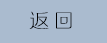
<style>
.page{position:relative;width:107px;height:43px;background:#aabbcf}
.page>*{position:absolute;margin:0}
.t1{font:19.4px "huxiaobo-meixin-QQ:371136753";color:#000000}
</style>
<div class="page">
<p class="t1" style="left:29px;top:11px;width:43px;height:18px">返 回</p>
</div>
